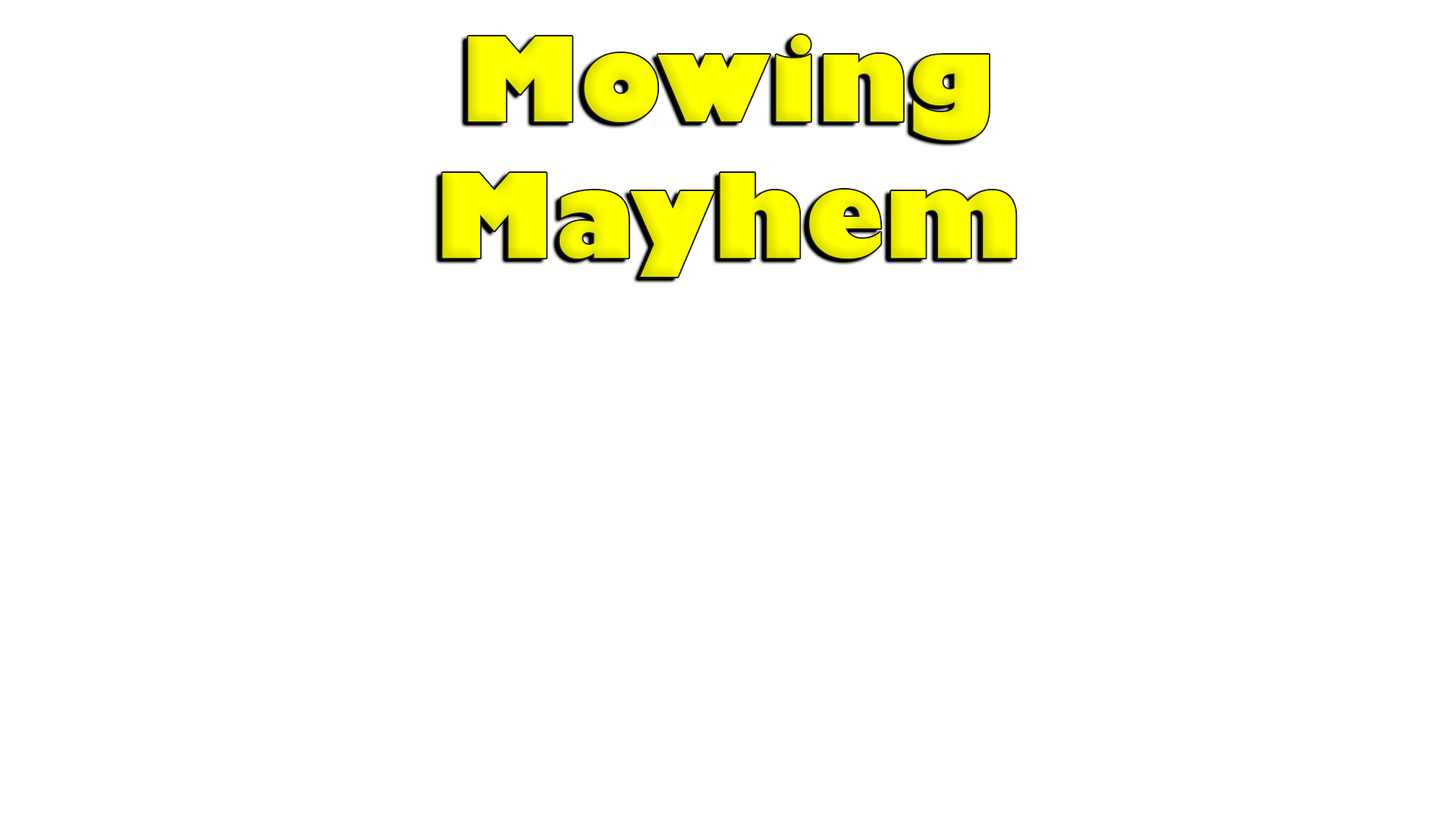
<style>
.page{position:relative;width:1456px;height:819px;background:#ffffff}
.page>*{position:absolute;margin:0}
.t1{font:113.7px "GillSans-UltraBold";color:#ffff00}
</style>
<div class="page">
<p class="t1" style="left:442px;top:35px;width:574px;height:242px;text-align:center">Mowing <br>Mayhem</p>
</div>
